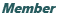
<style>
.page{position:relative;width:58px;height:16px;background:#ffffff}
.page>*{position:absolute;margin:0}
.t1{font:15.4px "ErasITC-Bold";color:#275c5f;scale:0.83 1}
</style>
<div class="page">
<p class="t1" style="left:2px;top:3px;width:54px;height:10px">Member</p>
</div>
